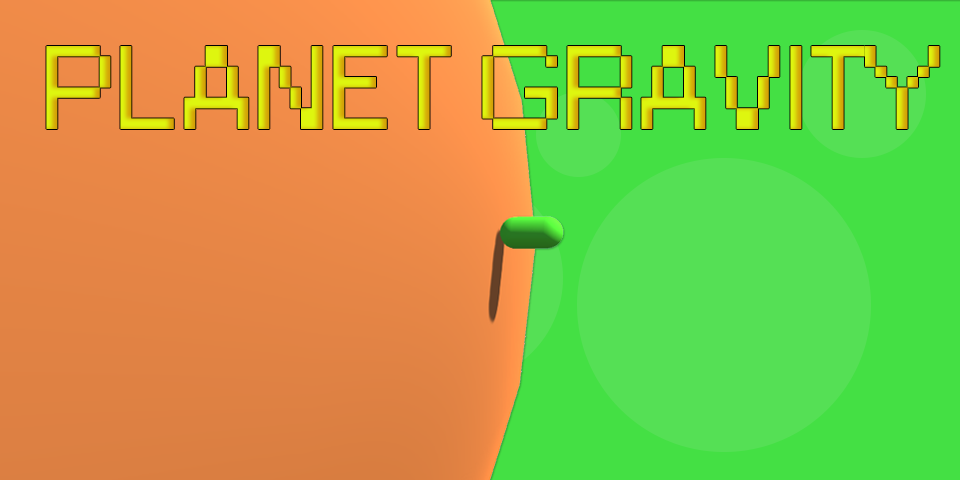
<style>
.page{position:relative;width:960px;height:480px;background:#44e044}
.page>*{position:absolute;margin:0}
.t1{font:110.7px "Small Fonts";scale:1.23 1}
</style>
<div class="page">
<p class="t1" style="left:46px;top:46px;width:894px;height:83px">PLANET GRAVITY</p>
</div>
